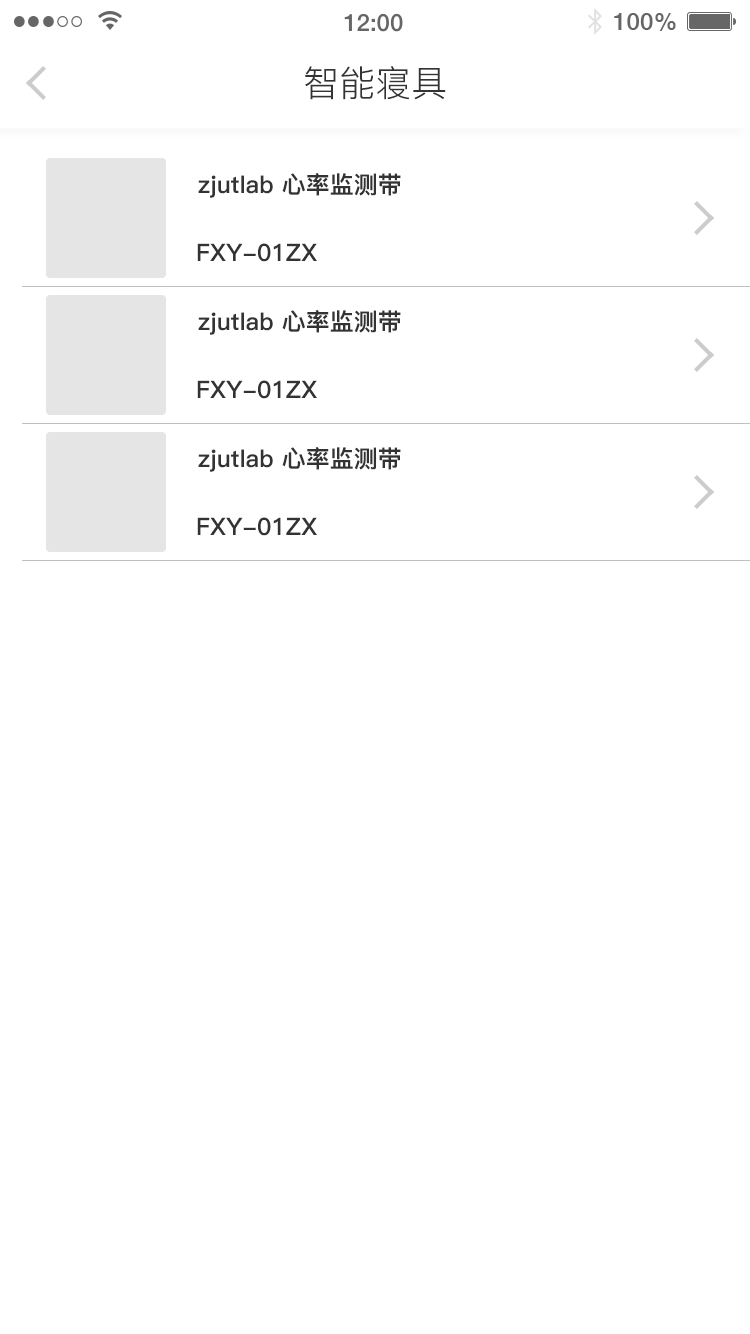
<style>
.page{position:relative;width:750px;height:1334px;background:#ffffff}
.page>*{position:absolute;margin:0}
.t1{font:36px "PingFang-SC-Regular";color:#333333}
.t2{font:24px "PingFang-SC-Heavy";color:#333333}
</style>
<div class="page">
<p class="t1" style="left:305px;top:66px;width:141px;height:34px">智能寝具</p>
<p class="t2" style="left:198px;top:173px;width:203px;height:25px">zjutlab 心率监测带</p>
<p class="t2" style="left:197px;top:243px;width:120px;height:19px">FXY-01ZX</p>
<p class="t2" style="left:198px;top:310px;width:203px;height:25px">zjutlab 心率监测带</p>
<p class="t2" style="left:197px;top:380px;width:120px;height:19px">FXY-01ZX</p>
<p class="t2" style="left:198px;top:447px;width:203px;height:25px">zjutlab 心率监测带</p>
<p class="t2" style="left:197px;top:517px;width:120px;height:19px">FXY-01ZX</p>
</div>
